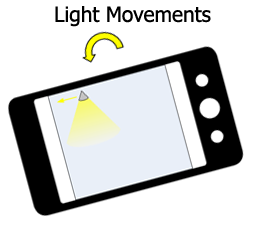
<style>
.page{position:relative;width:256px;height:240px;background:#ffffff}
.page>*{position:absolute;margin:0}
.t1{font:20.8px "Tahoma";color:#000000}
</style>
<div class="page">
<p class="t1" style="left:55px;top:6px;width:156px;height:21px">Light Movements</p>
</div>
